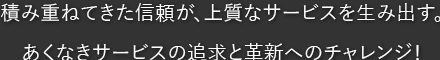
<style>
.page{position:relative;width:440px;height:60px;background:#333333}
.page>*{position:absolute;margin:0}
.t1{font:20px/40px "YuGothic-Medium";color:#ffffff}
</style>
<div class="page">
<p class="t1" style="left:1px;top:3px;width:440px;height:59px;text-align:center">積み重ねてきた信頼が、上質なサービスを生み出す。<br>あくなきサービスの追求と革新へのチャレンジ！</p>
</div>
